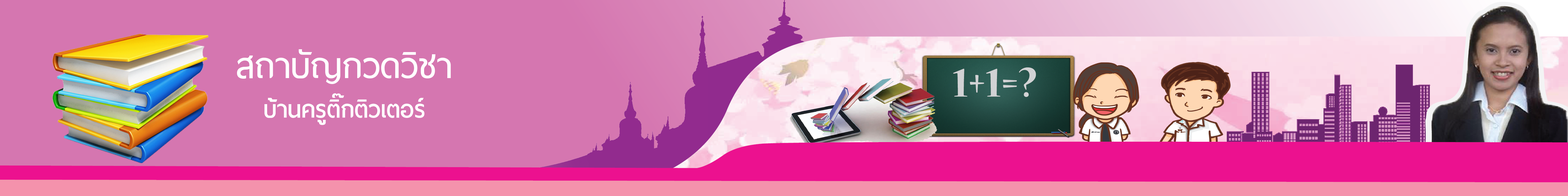
<style>
.page{position:relative;width:1568px;height:196px;background:#d576b0}
.page>*{position:absolute;margin:0}
.t1{font:45.2px "ThaiSansNeue-SemiBold";color:#ffffff}
.t2{font:30.1px "ThaiSansNeue-Bold";color:#ffffff}
.t3{font:37.7px "ThaiSansNeue-SemiBold";color:#ffffff}
</style>
<div class="page">
<p class="t1" style="left:237px;top:49px;width:214px;height:35px">สถาบัญกวดวิชา</p>
<p class="t2" style="left:264px;top:98px;width:160px;height:27px">บ้านครูติกติวเตอร์</p>
<p class="t3" style="left:332px;top:93px;width:12px;height:5px">๊</p>
</div>
